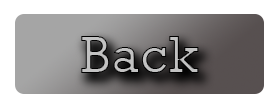
<style>
.page{position:relative;width:279px;height:108px;background:#ffffff}
.page>*{position:absolute;margin:0}
.t1{font:53.5px "Rockwell"}
</style>
<div class="page">
<p class="t1" style="left:81px;top:36px;width:118px;height:37px">Back</p>
</div>
